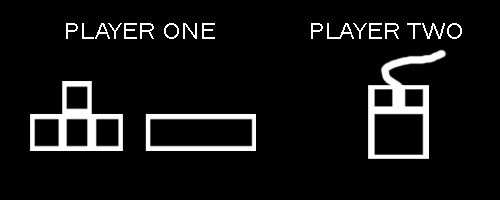
<style>
.page{position:relative;width:500px;height:200px;background:#000000}
.page>*{position:absolute;margin:0}
.t1{font:23.2px "FranklinGothic-Book";color:#ffffff;scale:1.23 1}
</style>
<div class="page">
<p class="t1" style="left:66px;top:23px;width:149px;height:16px">PLAYER ONE</p>
<p class="t1" style="left:311px;top:23px;width:151px;height:16px">PLAYER TWO</p>
</div>
